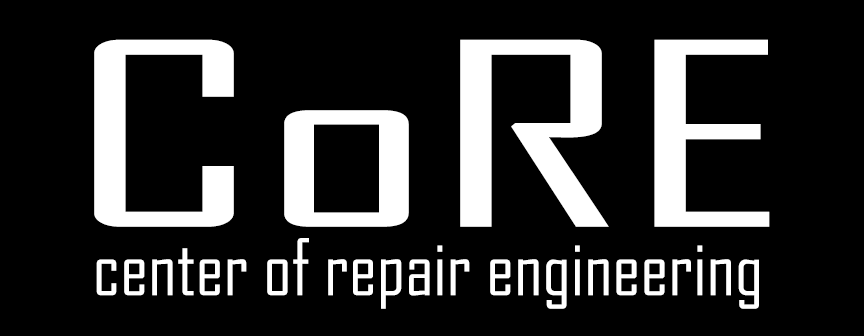
<style>
.page{position:relative;width:864px;height:336px;background:#000000}
.page>*{position:absolute;margin:0}
.t1{font:244.4px "AgencyFB-Reg";color:#ffffff;scale:1.86 1}
.t2{font:75px "AgencyFB-Reg";color:#ffffff}
</style>
<div class="page">
<p class="t1" style="left:94px;top:39px;width:676px;height:188px">CoRE</p>
<p class="t2" style="left:96px;top:238px;width:663px;height:71px">center of repair engineering</p>
</div>
